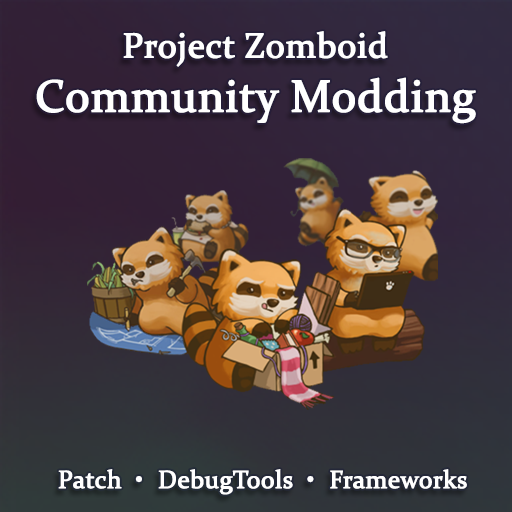
<style>
.page{position:relative;width:512px;height:512px}
.page>*{position:absolute;margin:0}
.t1{font:45px "Constantia";color:#ffffff;font-weight:bold}
.t2{font:35px "Constantia";color:#ffffff;font-weight:bold}
.t3{font:25px "Constantia";color:#ffffff;font-weight:bold}
</style>
<div class="page">
<p class="t1" style="left:36px;top:31px;width:440px;height:93px;text-align:center"><span class="t2">Project Zomboid<br></span>Community Modding</p>
<p class="t3" style="left:58px;top:469px;width:409px;height:26px">Patch  •  DebugTools  •  Frameworks</p>
</div>
